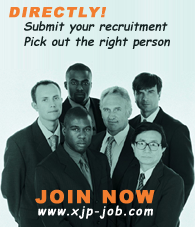
<style>
.page{position:relative;width:195px;height:227px}
.page>*{position:absolute;margin:0}
.t1{font:12px/14px "ComicSansMS-Bold";color:#142121;font-style:italic}
.t2{font:14px/14px "Arial-Black";letter-spacing:0.1em;color:#f27d2f;font-weight:bold;font-style:italic}
.t3{font:18px "Arial-Black";letter-spacing:0.1em;color:#f27d2f;font-weight:bold}
.t4{font:12px "ComicSansMS";letter-spacing:0.1em;color:#ffffff;font-weight:bold;font-style:italic}
</style>
<div class="page">
<p class="t1" style="left:9px;top:6px;width:161px;height:43px"><span class="t2">DIRECTLY!<br>   </span>Submit your recruitment<br>   Pick out the right person</p>
<p class="t3" style="left:35px;top:189px;width:120px;height:15px">JOIN NOW</p>
<p class="t4" style="left:38px;top:205px;width:115px;height:14px">www.xjp-job.com</p>
</div>
